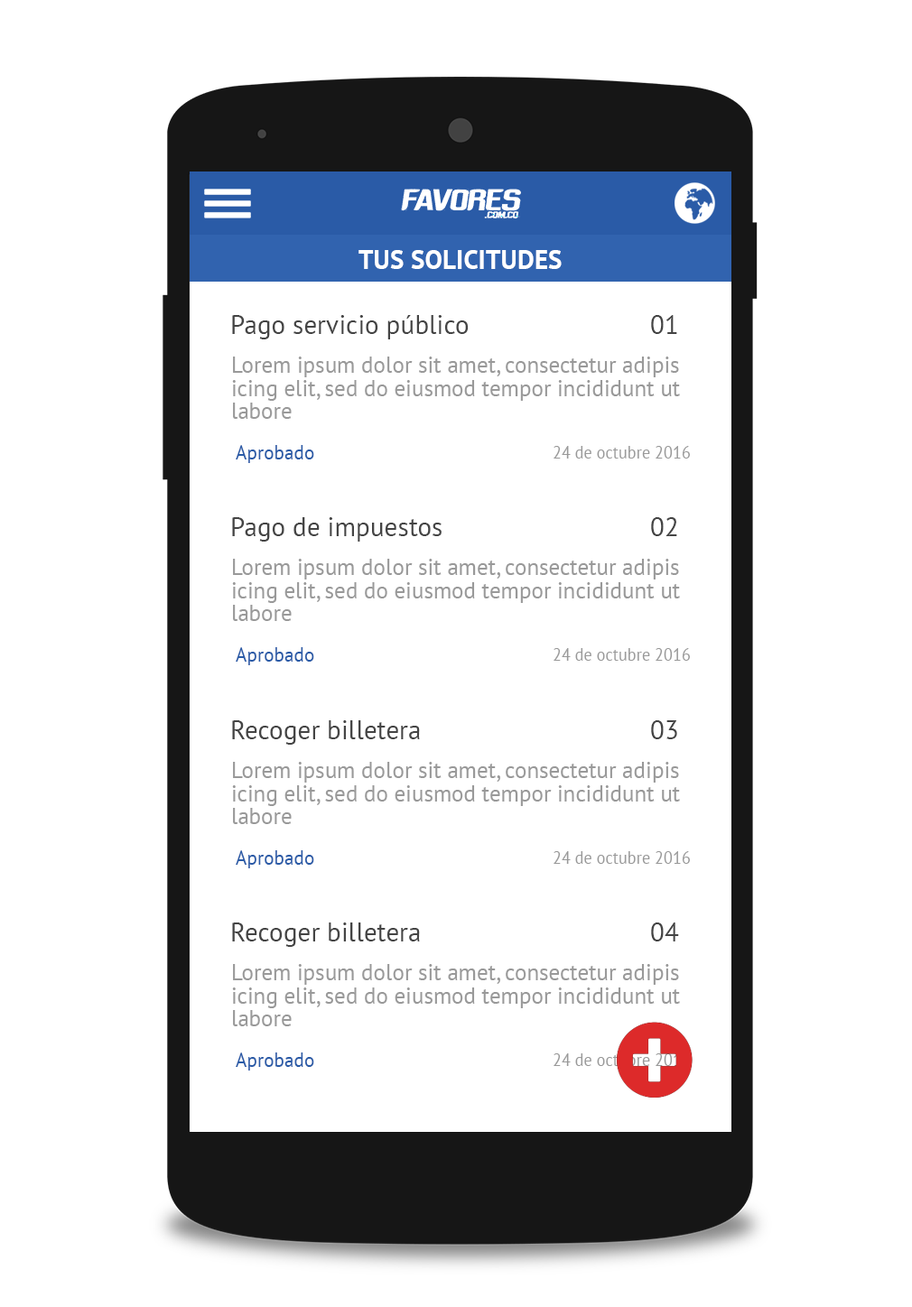
<style>
.page{position:relative;width:912px;height:1307px;background:#ffffff}
.page>*{position:absolute;margin:0}
.t1{font:27.5px "PTSans-Bold";color:#ffffff;scale:0.96 1}
.t2{font:27.5px "PTSans-Regular";color:#444444;scale:0.96 1}
.t3{font:23.5px/22.6px "PTSans-Regular";color:#999999;scale:0.96 1}
.t4{font:20px "PTSans-Regular";color:#2a5ba7;scale:0.96 1}
.t5{font:17.1px "PTSans-Regular";color:#999999;scale:0.96 1}
</style>
<div class="page">
<p class="t1" style="left:358px;top:250px;width:204px;height:19px">TUS SOLICITUDES</p>
<p class="t2" style="left:232px;top:315px;width:237px;height:25px">Pago servicio público</p>
<p class="t2" style="left:651px;top:315px;width:26px;height:19px">01</p>
<p class="t3" style="left:232px;top:357px;width:448px;height:62px">Lorem ipsum dolor sit amet, consectetur adipis icing elit, sed do eiusmod tempor incididunt ut labore</p>
<p class="t4" style="left:236px;top:445px;width:78px;height:18px">Aprobado</p>
<p class="t5" style="left:554px;top:446px;width:136px;height:13px">24 de octubre 2016</p>
<p class="t2" style="left:232px;top:517px;width:210px;height:25px">Pago de impuestos</p>
<p class="t2" style="left:651px;top:517px;width:26px;height:19px">02</p>
<p class="t3" style="left:232px;top:559px;width:448px;height:62px">Lorem ipsum dolor sit amet, consectetur adipis icing elit, sed do eiusmod tempor incididunt ut labore</p>
<p class="t4" style="left:236px;top:647px;width:78px;height:18px">Aprobado</p>
<p class="t5" style="left:554px;top:648px;width:136px;height:13px">24 de octubre 2016</p>
<p class="t2" style="left:232px;top:721px;width:188px;height:24px">Recoger billetera</p>
<p class="t2" style="left:651px;top:721px;width:26px;height:19px">03</p>
<p class="t3" style="left:232px;top:762px;width:448px;height:62px">Lorem ipsum dolor sit amet, consectetur adipis icing elit, sed do eiusmod tempor incididunt ut labore</p>
<p class="t4" style="left:236px;top:851px;width:78px;height:18px">Aprobado</p>
<p class="t5" style="left:554px;top:851px;width:136px;height:13px">24 de octubre 2016</p>
<p class="t2" style="left:232px;top:923px;width:188px;height:24px">Recoger billetera</p>
<p class="t2" style="left:651px;top:923px;width:28px;height:19px">04</p>
<p class="t3" style="left:232px;top:964px;width:448px;height:63px">Lorem ipsum dolor sit amet, consectetur adipis icing elit, sed do eiusmod tempor incididunt ut labore</p>
<p class="t4" style="left:236px;top:1053px;width:78px;height:18px">Aprobado</p>
<p class="t5" style="left:554px;top:1054px;width:136px;height:12px">24 de octubre 2016</p>
</div>
